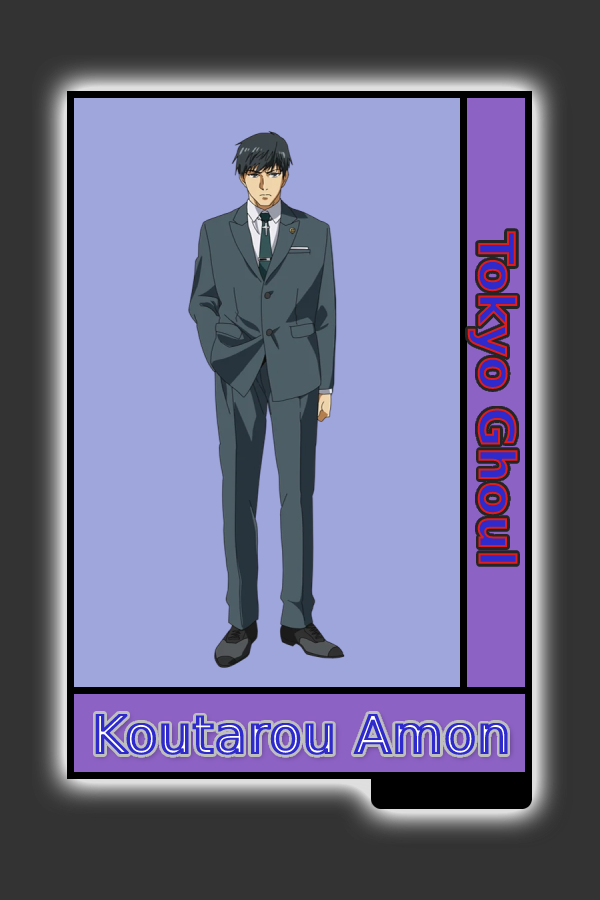
<style>
.page{position:relative;width:600px;height:900px;background:#9ea6db}
.page>*{position:absolute;margin:0}
.t1{font:48.8px "MADETOMMY-Bold"}
.t2{font:52px "CoolveticaRg-Regular";font-weight:bold}
</style>
<div class="page">
<p class="t1" style="left:467px;top:231px;width:51px;height:333px;rotate:90deg">Tokyo Ghoul</p>
<p class="t2" style="left:95px;top:714px;width:413px;height:41px">Koutarou Amon</p>
</div>
